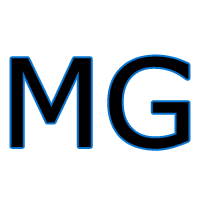
<style>
.page{position:relative;width:200px;height:200px;background:#ffffff}
.page>*{position:absolute;margin:0}
.t1{font:121.9px "Verdana";color:#000000}
</style>
<div class="page">
<p class="t1" style="left:11px;top:56px;width:178px;height:93px">MG</p>
</div>
